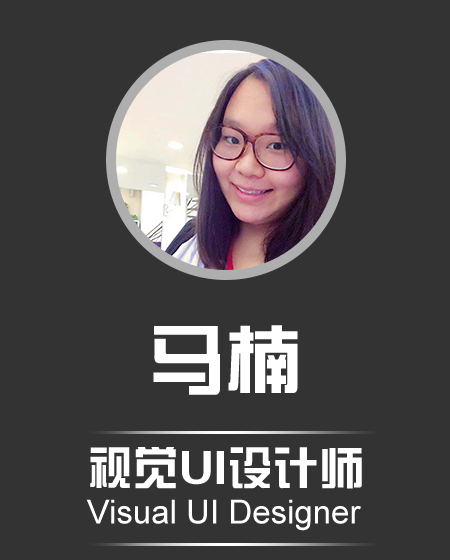
<style>
.page{position:relative;width:450px;height:560px;background:#333333}
.page>*{position:absolute;margin:0}
.t1{font:76.2px "FZZYJW--GB1-0";color:#ffffff}
.t2{font:33px "ArialMT";color:#ffffff}
.t3{font:45.7px "FZZYJW--GB1-0";color:#ffffff}
</style>
<div class="page">
<p class="t1" style="left:153px;top:325px;width:145px;height:70px">马楠</p>
<p class="t2" style="left:86px;top:447px;width:276px;height:84px"><span class="t3">视觉UI设计师<br></span>Visual UI Designer</p>
</div>
